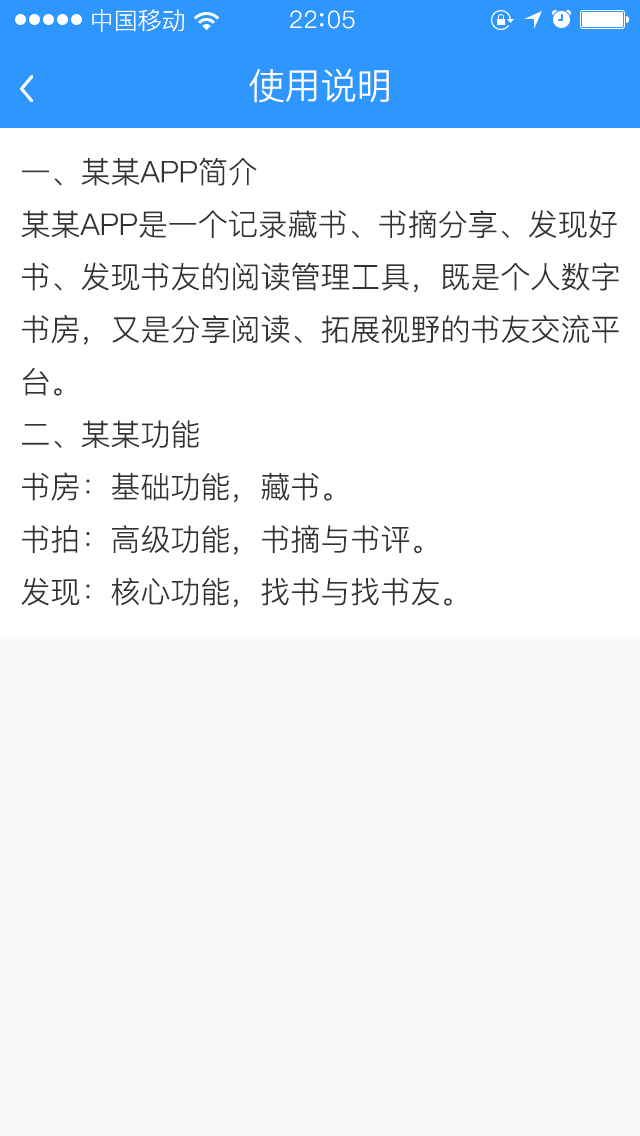
<style>
.page{position:relative;width:640px;height:1136px;background:#f9f9f9}
.page>*{position:absolute;margin:0}
.t1{font:24px "PingFang-SC-Regular";color:#ffffff}
.t2{font:24px "PingFang-SC-Regular";letter-spacing:0.03em;color:#ffffff}
.t3{font:36px "PingFang-SC-Regular";color:#ffffff}
.t4{font:30px "PingFang-SC-Regular";color:#333333}
</style>
<div class="page">
<p class="t1" style="left:92px;top:9px;width:92px;height:23px">中国移动</p>
<p class="t2" style="left:290px;top:10px;width:65px;height:19px">22 05</p>
<p class="t3" style="left:249px;top:68px;width:140px;height:35px">使用说明</p>
<p class="t4" style="left:21px;top:157px;width:598px;height:451px">一、某某APP简介<br>某某APP是一个记录藏书、书摘分享、发现好<br>书、发现书友的阅读管理工具，既是个人数字<br>书房，又是分享阅读、拓展视野的书友交流平<br>台。<br>二、某某功能<br>书房：基础功能，藏书。<br>书拍：高级功能，书摘与书评。<br>发现：核心功能，找书与找书友。</p>
</div>
